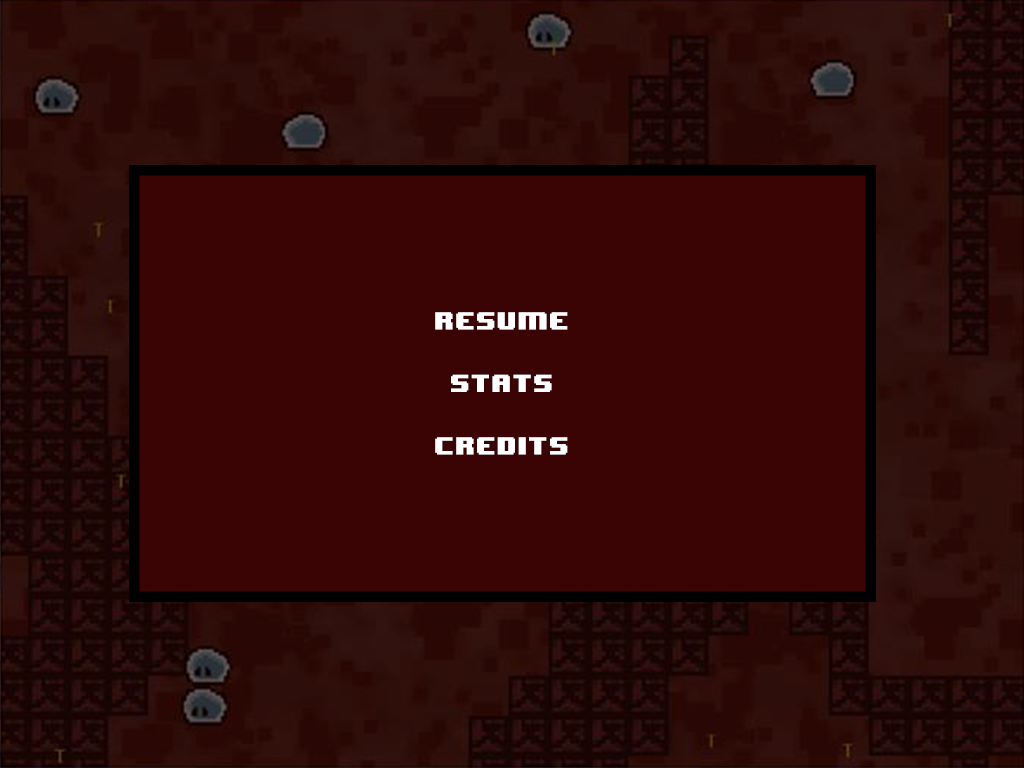
<style>
.page{position:relative;width:1024px;height:768px;background:#3a0404}
.page>*{position:absolute;margin:0}
.t1{font:20.8px/62.5px "8BITWONDERNominal";color:#ffffff}
</style>
<div class="page">
<p class="t1" style="left:435px;top:312px;width:133px;height:143px;text-align:center">RESUME<br>STATS<br>CREDITS</p>
</div>
